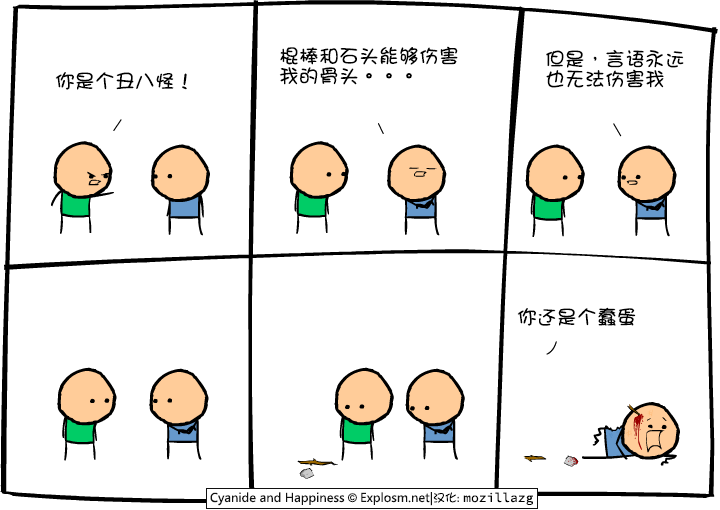
<style>
.page{position:relative;width:720px;height:510px;background:#ffffff}
.page>*{position:absolute;margin:0}
.t1{font:20px/20px "DFGirl";color:#000000}
.t2{font:20px "DFGirl";color:#000000}
</style>
<div class="page">
<p class="t1" style="left:279px;top:46px;width:179px;height:39px">棍棒和石头能够伤害<br>我的骨头。。。</p>
<p class="t1" style="left:546px;top:49px;width:138px;height:39px">但是，言语永远<br>也无法伤害我</p>
<p class="t2" style="left:55px;top:72px;width:132px;height:18px">你是个丑八怪！</p>
<p class="t2" style="left:517px;top:307px;width:119px;height:19px">你还是个蠢蛋</p>
</div>
